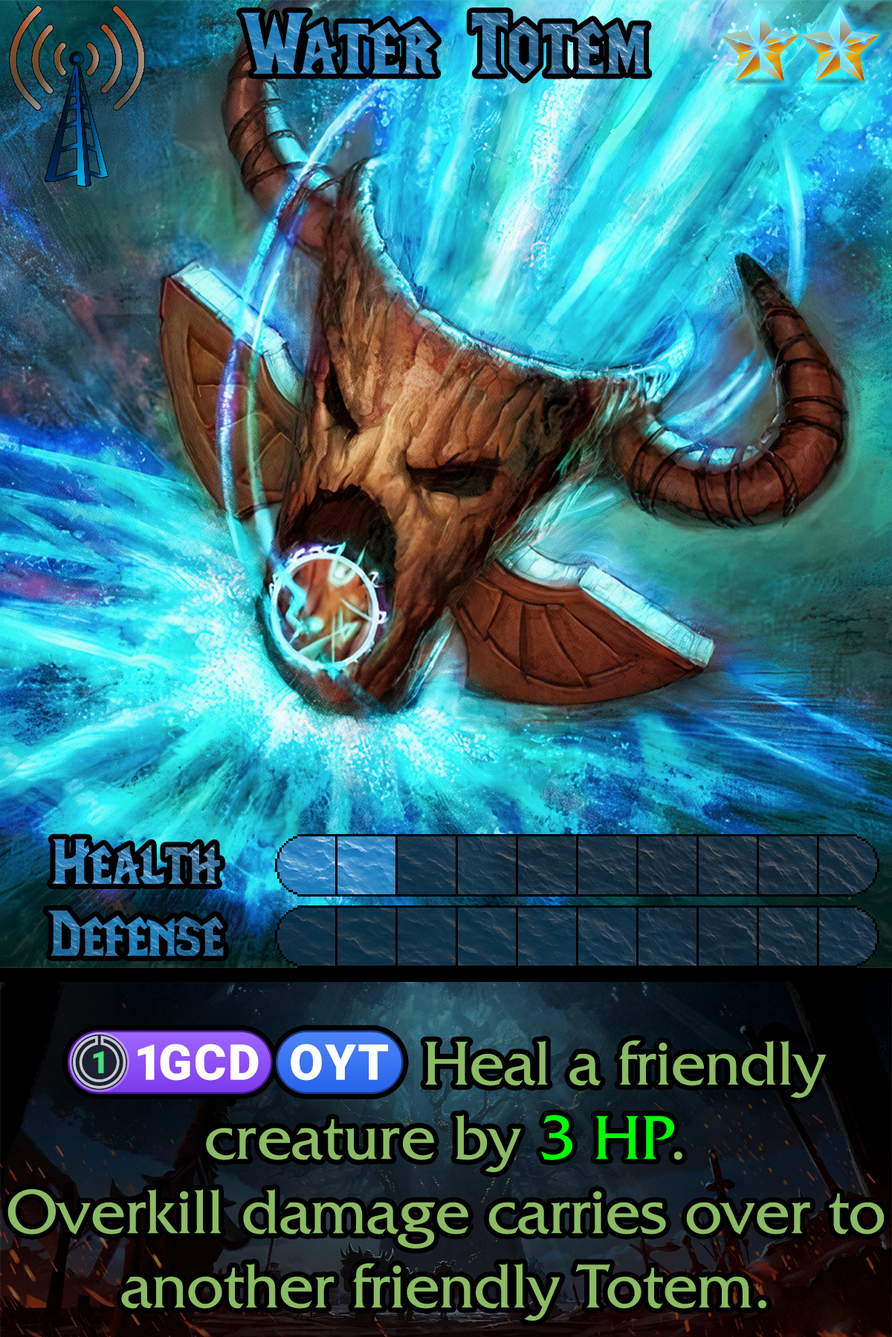
<style>
.page{position:relative;width:892px;height:1337px}
.page>*{position:absolute;margin:0}
.t1{font:148.6px "LifeCraft"}
.t2{font:109.2px "LifeCraft"}
.t3{font:110.7px "LifeCraft"}
.t4{font:111.5px/74.3px "FrizQuadrataStd"}
.t5{font:111.5px/74.3px "stoogedings-Regular"}
</style>
<div class="page">
<p class="t1" style="left:241px;top:13px;width:406px;height:66px">Water Totem</p>
<p class="t2" style="left:51px;top:839px;width:169px;height:45px">Health</p>
<p class="t3" style="left:48px;top:910px;width:176px;height:46px">Defense</p>
<p class="t4" style="left:7px;top:1031px;width:877px;height:290px;text-align:center"><span class="t5">(1GCD)(OYT)</span> Heal a friendly creature by 3 HP.<br>Overkill damage carries over to another friendly Totem.</p>
</div>
